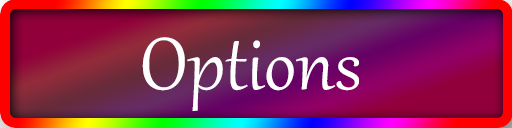
<style>
.page{position:relative;width:512px;height:128px}
.page>*{position:absolute;margin:0}
.t1{font:90px "Gabriola";color:#ffffff}
</style>
<div class="page">
<p class="t1" style="left:142px;top:37px;width:217px;height:74px">Options</p>
</div>
